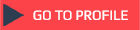
<style>
.page{position:relative;width:140px;height:30px;background:#fc4349}
.page>*{position:absolute;margin:0}
.t1{font:14px "Play";color:#ffffff}
</style>
<div class="page">
<p class="t1" style="left:33px;top:10px;width:95px;height:10px">GO TO PROFILE</p>
</div>
